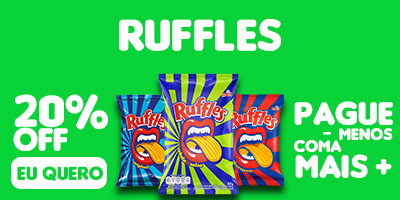
<style>
.page{position:relative;width:400px;height:200px;background:#07d237}
.page>*{position:absolute;margin:0}
.t1{font:47.3px "Insaniburger";color:#ffffff}
.t2{font:47.9px "Insaniburger";color:#ffffff}
.t3{font:34.5px "Insaniburger";color:#ffffff}
.t4{font:34.2px "Insaniburger";color:#ffffff}
.t5{font:17.6px "Insaniburger";color:#ffffff}
.t6{font:20.1px "Insaniburger";color:#07d237}
</style>
<div class="page">
<p class="t1" style="left:119px;top:19px;width:162px;height:32px">ruffles</p>
<p class="t2" style="left:14px;top:94px;width:94px;height:36px">20%</p>
<p class="t3" style="left:294px;top:101px;width:99px;height:24px">pague</p>
<p class="t4" style="left:13px;top:127px;width:55px;height:24px">off</p>
<p class="t5" style="left:323px;top:132px;width:8px;height:3px">-</p>
<p class="t5" style="left:339px;top:128px;width:54px;height:12px">menos</p>
<p class="t5" style="left:294px;top:140px;width:48px;height:12px">coma</p>
<p class="t3" style="left:295px;top:154px;width:73px;height:24px">mais</p>
<p class="t3" style="left:375px;top:159px;width:17px;height:16px">+</p>
<p class="t6" style="left:17px;top:166px;width:86px;height:15px">eu quero</p>
</div>
